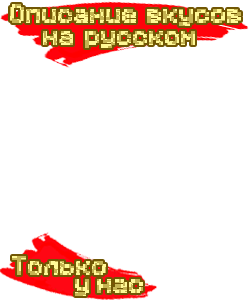
<style>
.page{position:relative;width:252px;height:300px;background:#ffffff}
.page>*{position:absolute;margin:0}
.t1{font:20px "Minecraft";font-weight:bold}
</style>
<div class="page">
<p class="t1" style="left:10px;top:4px;width:126px;height:19px">Описание</p>
<p class="t1" style="left:147px;top:9px;width:94px;height:17px">вкусов</p>
<p class="t1" style="left:43px;top:31px;width:30px;height:14px">на</p>
<p class="t1" style="left:85px;top:31px;width:110px;height:17px">русском</p>
<p class="t1" style="left:12px;top:256px;width:94px;height:19px">Только</p>
<p class="t1" style="left:75px;top:279px;width:68px;height:17px">у нас</p>
</div>
